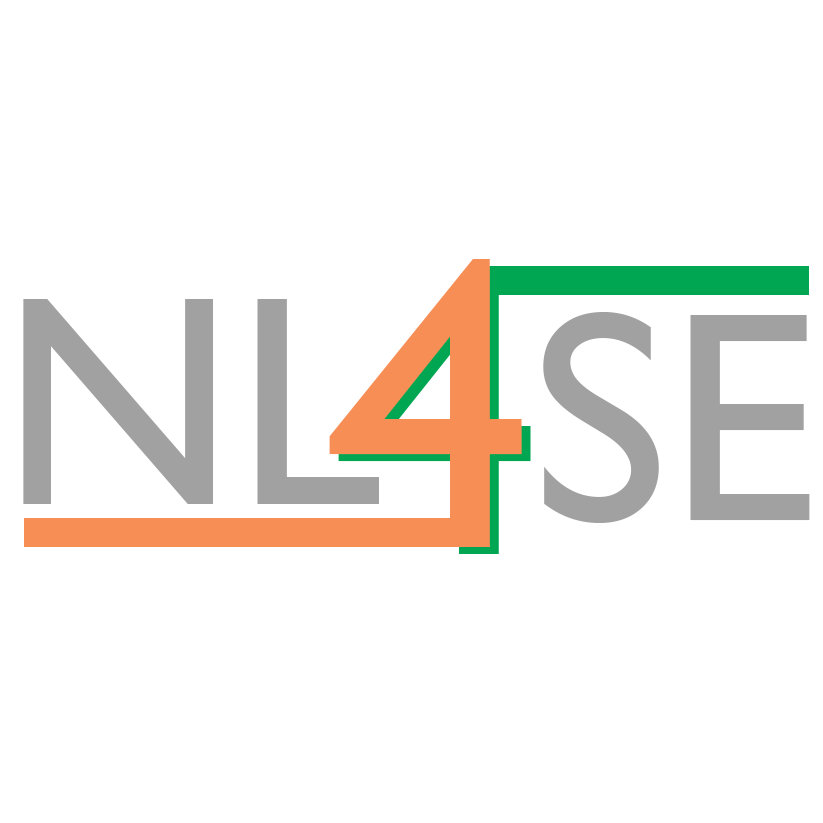
<style>
.page{position:relative;width:823px;height:823px;background:#ffffff}
.page>*{position:absolute;margin:0}
.t1{font:416.7px "GillSansMT";color:#f68e56}
.t2{font:300px "GillSansMT";color:#a1a1a1}
</style>
<div class="page">
<p class="t1" style="left:329px;top:259px;width:193px;height:288px">4</p>
<p class="t1" style="left:338px;top:266px;width:193px;height:288px">4</p>
<p class="t2" style="left:23px;top:299px;width:356px;height:205px">NL</p>
<p class="t2" style="left:543px;top:312px;width:267px;height:211px">SE</p>
</div>
